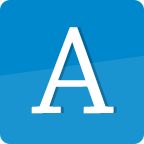
<style>
.page{position:relative;width:144px;height:144px;background:#1a94d1}
.page>*{position:absolute;margin:0}
.t1{font:130px "ChaparralPro-Regular";color:#ffffff}
</style>
<div class="page">
<p class="t1" style="left:31px;top:27px;width:83px;height:87px">A</p>
</div>
